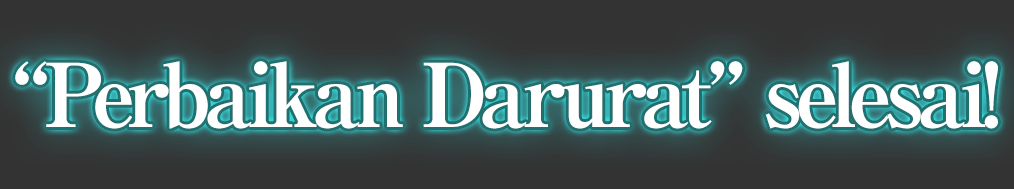
<style>
.page{position:relative;width:1014px;height:189px;background:#333333}
.page>*{position:absolute;margin:0}
.t1{font:88px "RyuminPro-ExBold";letter-spacing:-0.08em;color:#ffffff}
</style>
<div class="page">
<p class="t1" style="left:15px;top:61px;width:983px;height:68px">“Perbaikan Darurat” selesai!</p>
</div>
